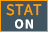
<style>
.page{position:relative;width:48px;height:32px;background:#415561}
.page>*{position:absolute;margin:0}
.t1{font:16px "SourceSansRoman-Regular";letter-spacing:0.08em;color:#ff9c00}
.t2{font:14px "SourceSansRoman-Bold";letter-spacing:0.08em;color:#ffffff}
</style>
<div class="page">
<p class="t1" style="left:6px;top:4px;width:36px;height:12px">STAT</p>
<p class="t2" style="left:15px;top:19px;width:18px;height:10px">ON</p>
</div>
